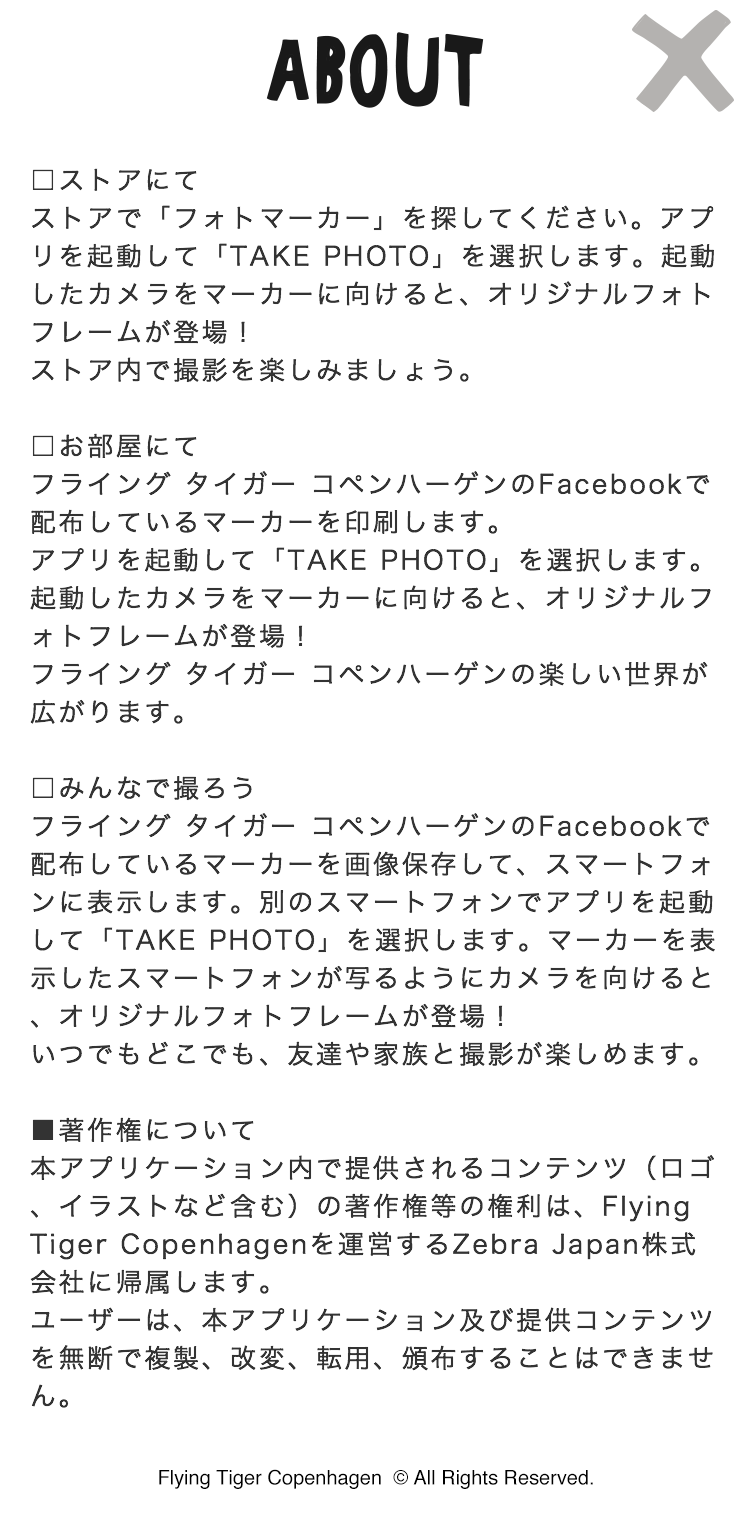
<style>
.page{position:relative;width:750px;height:1522px;background:#ffffff}
.page>*{position:absolute;margin:0}
.t1{font:26px/38px "HiraKakuProN-W3";letter-spacing:0.1em;color:#333333}
.t2{font:20px "Helvetica";color:#000000}
</style>
<div class="page">
<p class="t1" style="left:30px;top:168px;width:685px;height:1240px">□ストアにて<br>ストアで「フォトマーカー」を探してください。アプリを起動して「TAKE PHOTO」を選択します。起動したカメラをマーカーに向けると、オリジナルフォトフレームが登場！<br>ストア内で撮影を楽しみましょう。<br> <br>□お部屋にて<br>フライング タイガー コペンハーゲンのFacebookで配布しているマーカーを印刷します。<br>アプリを起動して「TAKE PHOTO」を選択します。起動したカメラをマーカーに向けると、オリジナルフォトフレームが登場！<br>フライング タイガー コペンハーゲンの楽しい世界が広がります。<br> <br>□みんなで撮ろう<br>フライング タイガー コペンハーゲンのFacebookで配布しているマーカーを画像保存して、スマートフォンに表示します。別のスマートフォンでアプリを起動して「TAKE PHOTO」を選択します。マーカーを表示したスマートフォンが写るようにカメラを向けると、オリジナルフォトフレームが登場！<br>いつでもどこでも、友達や家族と撮影が楽しめます。<br><br>■著作権について<br>本アプリケーション内で提供されるコンテンツ（ロゴ、イラストなど含む）の著作権等の権利は、Flying Tiger Copenhagenを運営するZebra Japan株式会社に帰属します。<br>ユーザーは、本アプリケーション及び提供コンテンツを無断で複製、改変、転用、頒布することはできません。</p>
<p class="t2" style="left:159px;top:1469px;width:434px;height:20px">Flying Tiger Copenhagen  © All Rights Reserved.</p>
</div>
